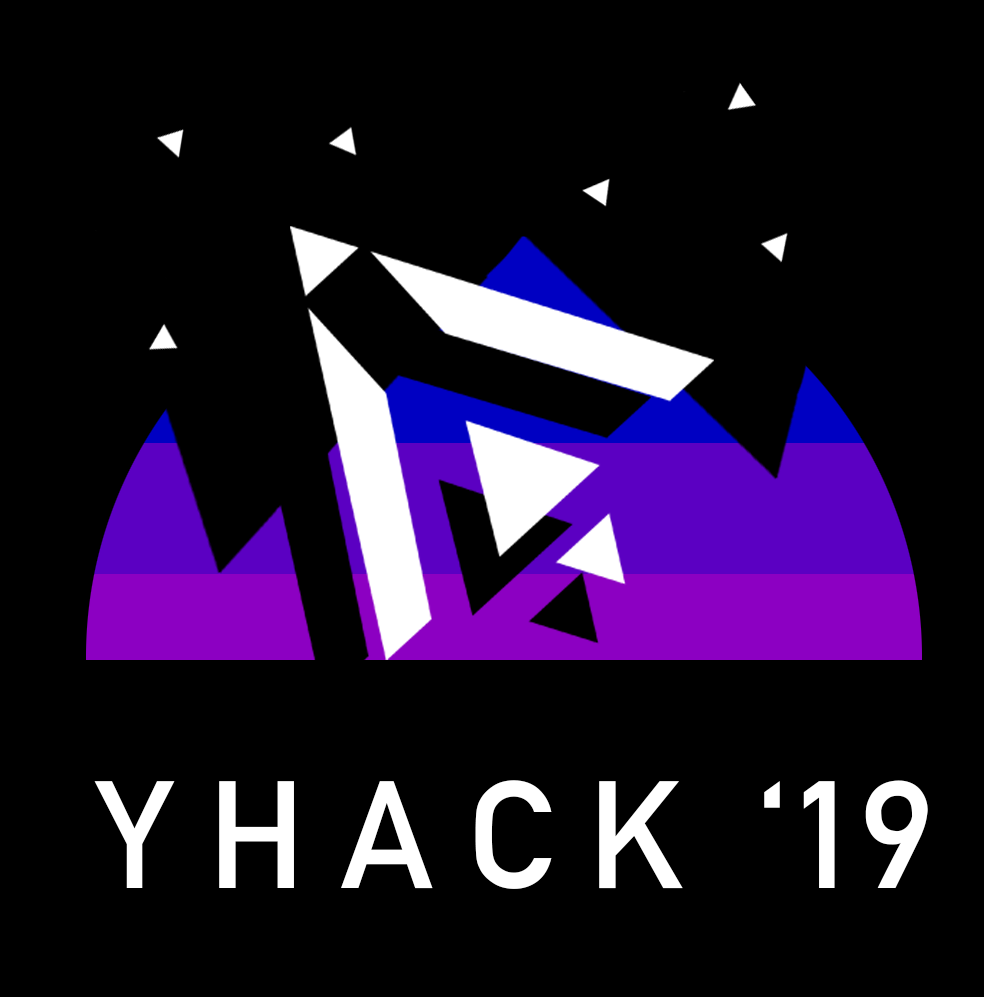
<style>
.page{position:relative;width:984px;height:997px;background:#000000}
.page>*{position:absolute;margin:0}
.t1{font:150px "DINAlternate-Bold";color:#ffffff}
</style>
<div class="page">
<p class="t1" style="left:94px;top:780px;width:834px;height:109px">Y H A C K  ‘19</p>
</div>
